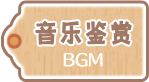
<style>
.page{position:relative;width:149px;height:82px}
.page>*{position:absolute;margin:0}
.t1{font:26.1px "shetumodengxiaofangti";color:#a07864;font-weight:bold;scale:0.94 1}
</style>
<div class="page">
<p class="t1" style="left:35px;top:20px;width:97px;height:25px">音乐鉴赏</p>
</div>
